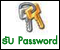
<style>
.page{position:relative;width:60px;height:50px;background:#ffffff}
.page>*{position:absolute;margin:0}
.t1{font:14px "PSLxKittithada-Bold";color:#0c7f1f;font-weight:bold}
</style>
<div class="page">
<p class="t1" style="left:2px;top:35px;width:56px;height:10px">รับ Password</p>
</div>
